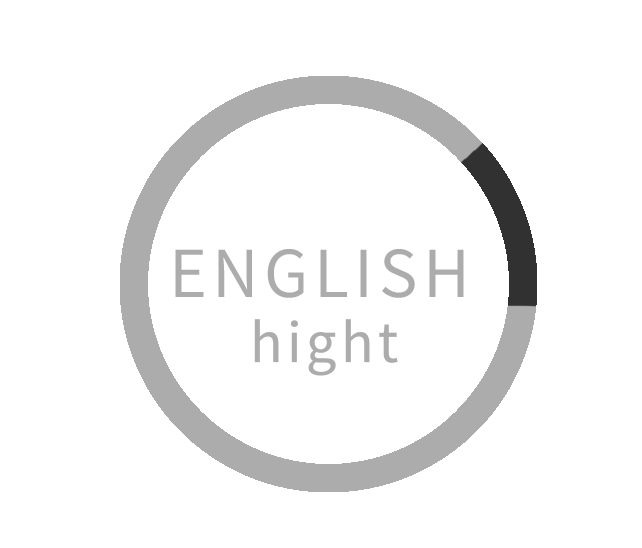
<style>
.page{position:relative;width:642px;height:548px;background:#ffffff}
.page>*{position:absolute;margin:0}
.t1{font:72px "SourceSansRoman-Regular";letter-spacing:0.075em;color:#acacac}
.t2{font:60px "SourceSansRoman-Regular";letter-spacing:0.075em;color:#acacac}
</style>
<div class="page">
<p class="t1" style="left:175px;top:249px;width:289px;height:49px">ENGLISH</p>
<p class="t2" style="left:254px;top:319px;width:144px;height:57px">hight</p>
</div>
